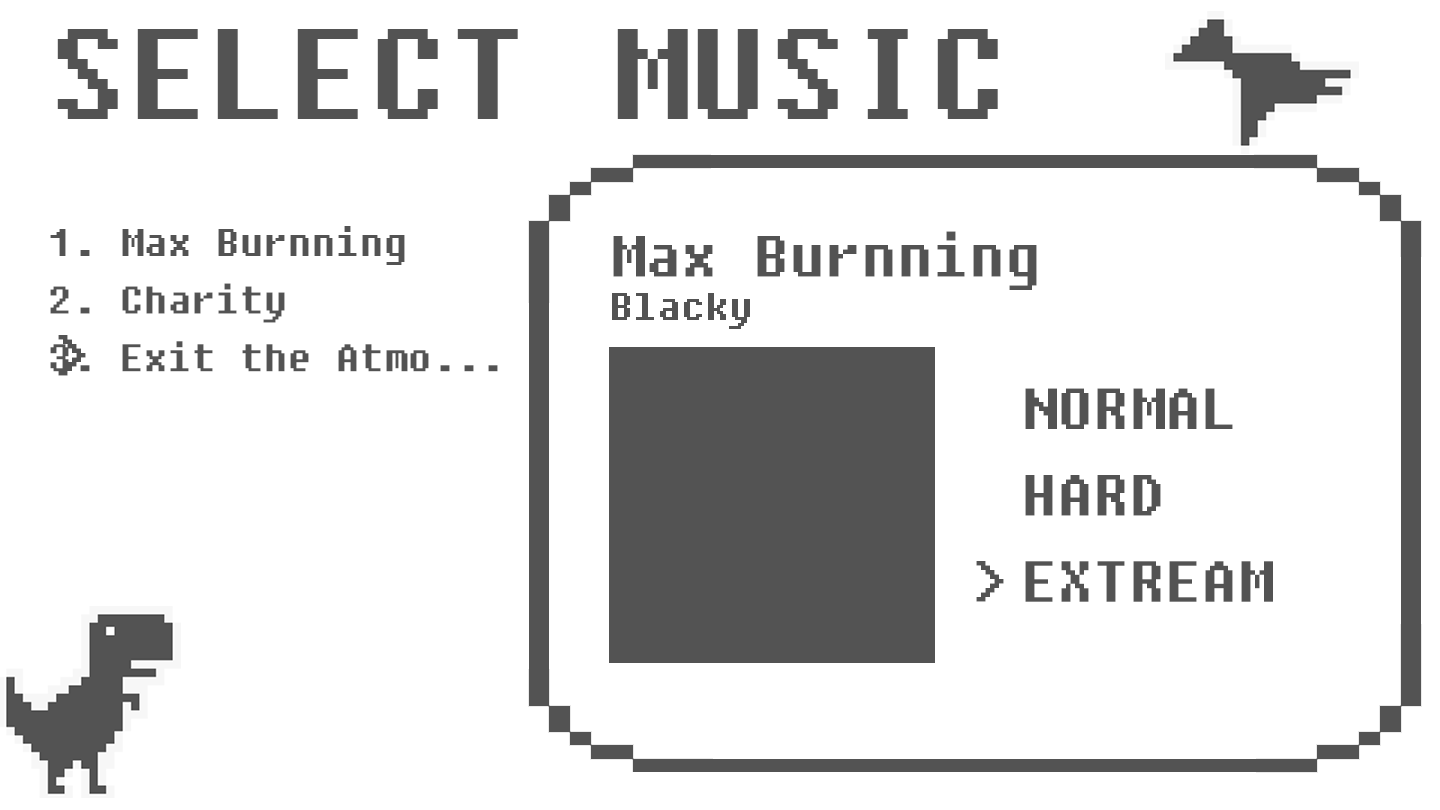
<style>
.page{position:relative;width:1440px;height:810px;background:#ffffff}
.page>*{position:absolute;margin:0}
.t1{font:160px "Fixedsys";color:#535353}
.t2{font:48px "Fixedsys";color:#535353}
.t3{font:72px "Fixedsys";color:#535353}
</style>
<div class="page">
<p class="t1" style="left:57px;top:29px;width:941px;height:90px">SELECT MUSIC</p>
<p class="t2" style="left:50px;top:226px;width:448px;height:146px">1. Max Burnning<br>2. Charity<br>3. Exit the Atmo...</p>
<p class="t3" style="left:613px;top:231px;width:424px;height:59px">Max Burnning</p>
<p class="t2" style="left:612px;top:293px;width:138px;height:36px">Blacky</p>
<p class="t3" style="left:58px;top:335px;width:28px;height:41px">&gt;</p>
<p class="t3" style="left:1025px;top:388px;width:248px;height:214px">NORMAL<br>HARD<br>EXTREAM</p>
<p class="t3" style="left:976px;top:561px;width:28px;height:41px">&gt;</p>
</div>
